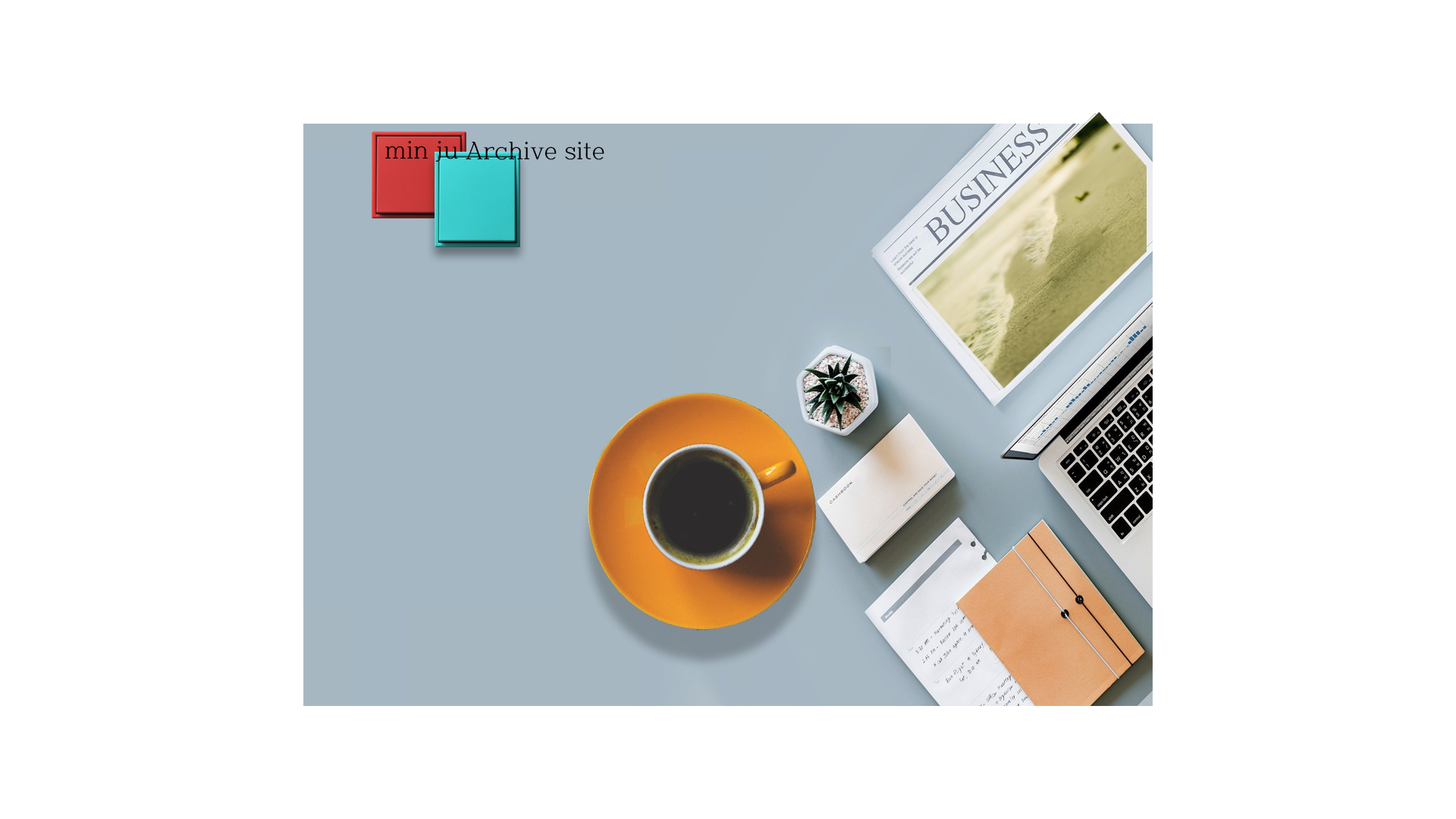
<style>
.page{position:relative;width:1456px;height:819px;background:#ffffff}
.page>*{position:absolute;margin:0}
.t1{font:24.3px "HCRBatang";color:#000000}
</style>
<div class="page">
<p class="t1" style="left:385px;top:140px;width:219px;height:22px;rotate:-90deg">min ju Archive site</p>
</div>
